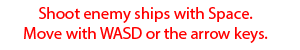
<style>
.page{position:relative;width:300px;height:50px;background:#ffffff}
.page>*{position:absolute;margin:0}
.t1{font:16.7px "MyriadPro-Regular";color:#ff0000}
</style>
<div class="page">
<p class="t1" style="left:24px;top:7px;width:244px;height:36px;text-align:center">Shoot enemy ships with Space.<br>Move with WASD or the arrow keys.</p>
</div>
